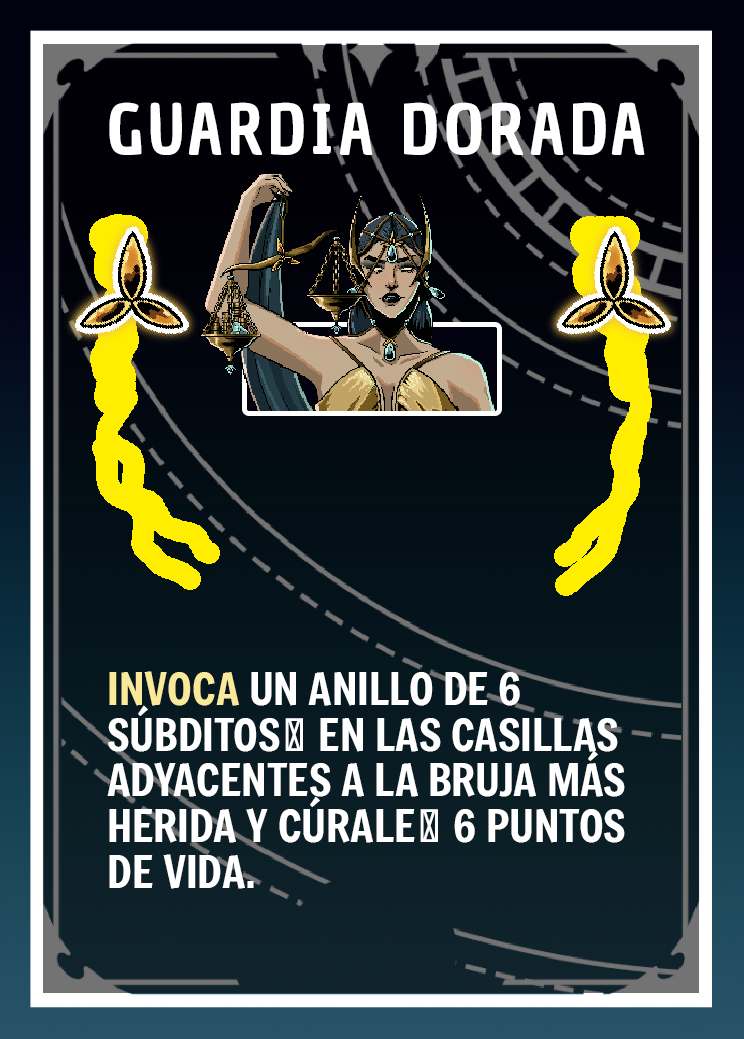
<style>
.page{position:relative;width:744px;height:1039px}
.page>*{position:absolute;margin:0}
.t1{font:66.7px "ChauPhilomeneOne-Regular";letter-spacing:0.075em;color:#ffffff}
.t2{font:43.7px/45.8px "Freeman-Regular";color:#ffffff}
.t3{font:43.7px/45.8px "Freeman-Regular";color:#fae99b}
</style>
<div class="page">
<p class="t1" style="left:109px;top:102px;width:536px;height:53px">GUARDIA DORADA</p>
<p class="t2" style="left:107px;top:671px;width:518px;height:218px"><span class="t3">INVOCA </span>UN ANILLO DE 6 SÚBDITOS👾 EN LAS CASILLAS ADYACENTES A LA BRUJA MÁS HERIDA Y CÚRALE🩸 6 PUNTOS <br>DE VIDA.</p>
</div>
